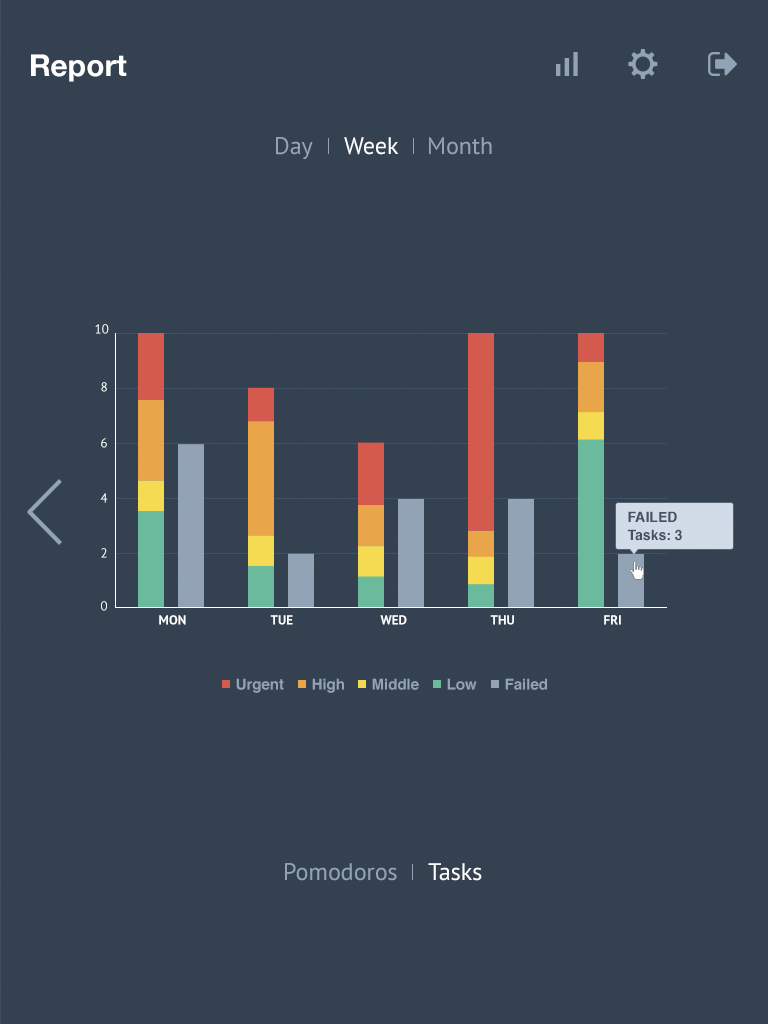
<style>
.page{position:relative;width:768px;height:1024px;background:#344150}
.page>*{position:absolute;margin:0}
.t1{font:30px "HelveticaNeue-Bold";color:#ffffff}
.t2{font:24px "PTSans-Regular";color:#93a3b6}
.t3{font:24px "PTSans-Regular";color:#ffffff}
.t4{font:13px "PTSans-Regular";color:#ffffff}
.t5{font:13px "PTSans-Regular"}
.t6{font:14px "Helvetica-Bold";color:#455261}
.t7{font:13px "PTSans-Bold";color:#ffffff}
.t8{font:15px "Helvetica-Bold";color:#93a3b6}
.t9{font:24px "PTSans-Regular";color:#fefeff}
</style>
<div class="page">
<p class="t1" style="left:31px;top:54px;width:96px;height:28px">Report</p>
<p class="t2" style="left:276px;top:137px;width:37px;height:22px">Day</p>
<p class="t3" style="left:344px;top:137px;width:55px;height:18px">Week</p>
<p class="t2" style="left:429px;top:137px;width:63px;height:18px">Month</p>
<p class="t4" style="left:95px;top:324px;width:14px;height:10px">10</p>
<p class="t4" style="left:101px;top:382px;width:6px;height:10px">8</p>
<p class="t5" style="left:101px;top:438px;width:6px;height:10px">6</p>
<p class="t5" style="left:100px;top:493px;width:8px;height:10px">4</p>
<p class="t6" style="left:628px;top:511px;width:49px;height:11px">FAILED</p>
<p class="t6" style="left:627px;top:529px;width:55px;height:12px">Tasks: 3</p>
<p class="t4" style="left:101px;top:548px;width:6px;height:10px">2</p>
<p class="t4" style="left:101px;top:601px;width:6px;height:10px">0</p>
<p class="t7" style="left:159px;top:615px;width:27px;height:10px">MON</p>
<p class="t7" style="left:270px;top:615px;width:23px;height:10px">TUE</p>
<p class="t7" style="left:380px;top:615px;width:27px;height:10px">WED</p>
<p class="t7" style="left:490px;top:615px;width:24px;height:10px">THU</p>
<p class="t7" style="left:604px;top:615px;width:17px;height:10px">FRI</p>
<p class="t8" style="left:236px;top:678px;width:48px;height:15px">Urgent</p>
<p class="t8" style="left:312px;top:678px;width:32px;height:15px">High</p>
<p class="t8" style="left:372px;top:678px;width:47px;height:12px">Middle</p>
<p class="t8" style="left:447px;top:678px;width:30px;height:12px">Low</p>
<p class="t8" style="left:505px;top:678px;width:42px;height:12px">Failed</p>
<p class="t2" style="left:285px;top:863px;width:112px;height:18px">Pomodoros</p>
<p class="t9" style="left:428px;top:863px;width:54px;height:18px">Tasks</p>
</div>
